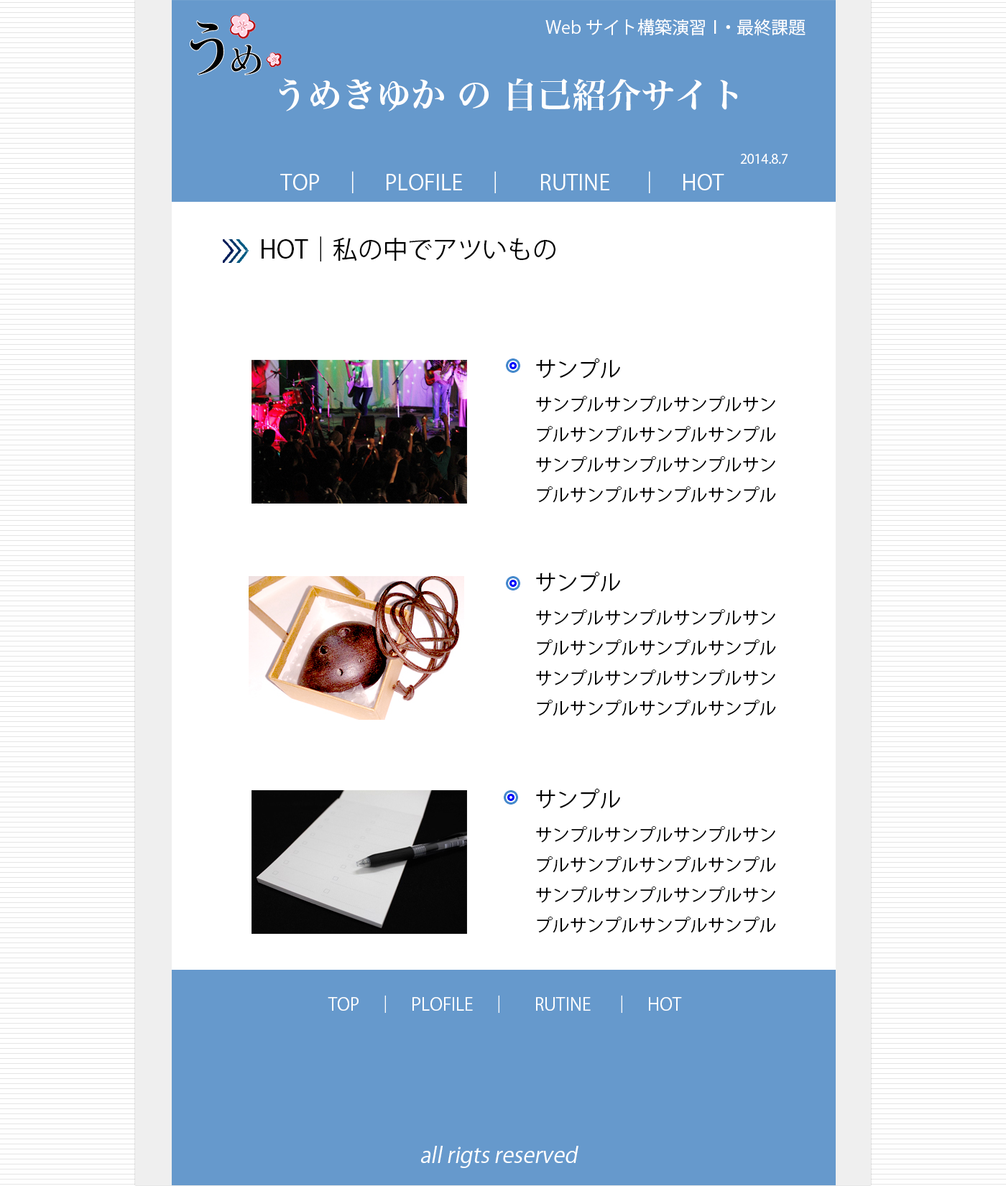
<style>
.page{position:relative;width:1006px;height:1186px;background:#ffffff}
.page>*{position:absolute;margin:0}
.t1{font:17.2px "KozGoPr6N-Regular";color:#ffffff}
.t2{font:34.5px "HiraMinProN-W6";color:#ffffff}
.t3{font:12.9px "KozGoPr6N-Regular";color:#ffffff}
.t4{font:21.5px "KozGoPr6N-Regular";color:#ffffff}
.t5{font:24.9px "KozGoPr6N-Regular";color:#000000}
.t6{font:17.2px "KozGoPr6N-Regular";color:#000000}
.t7{font:21.5px "KozGoPr6N-Regular";color:#000000}
.t8{font:21.5px "KozGoPr6N-Regular";color:#ffffff;font-style:italic}
</style>
<div class="page">
<p class="t1" style="left:545px;top:19px;width:260px;height:17px">Webサイト構築演習Ⅰ・最終課題</p>
<p class="t2" style="left:279px;top:78px;width:459px;height:33px">うめきゆか の 自己紹介サイト</p>
<p class="t3" style="left:740px;top:154px;width:48px;height:10px">2014.8.7</p>
<p class="t4" style="left:280px;top:171px;width:444px;height:22px">TOP　│　PLOFILE　│　 RUTINE 　│　HOT</p>
<p class="t5" style="left:261px;top:236px;width:294px;height:25px">HOT│私の中でアツいもの</p>
<p class="t6" style="left:536px;top:358px;width:240px;height:145px"><span class="t7">サンプル<br></span>サンプルサンプルサンプルサンプルサンプルサンプルサンプルサンプルサンプルサンプルサンプルサンプルサンプルサンプル</p>
<p class="t6" style="left:536px;top:571px;width:240px;height:145px"><span class="t7">サンプル<br></span>サンプルサンプルサンプルサンプルサンプルサンプルサンプルサンプルサンプルサンプルサンプルサンプルサンプルサンプル</p>
<p class="t6" style="left:536px;top:788px;width:240px;height:145px"><span class="t7">サンプル<br></span>サンプルサンプルサンプルサンプルサンプルサンプルサンプルサンプルサンプルサンプルサンプルサンプルサンプルサンプル</p>
<p class="t1" style="left:328px;top:995px;width:354px;height:18px">TOP　│　PLOFILE　│　 RUTINE 　│　HOT</p>
<p class="t8" style="left:421px;top:1146px;width:157px;height:22px">all rigts reserved</p>
</div>
